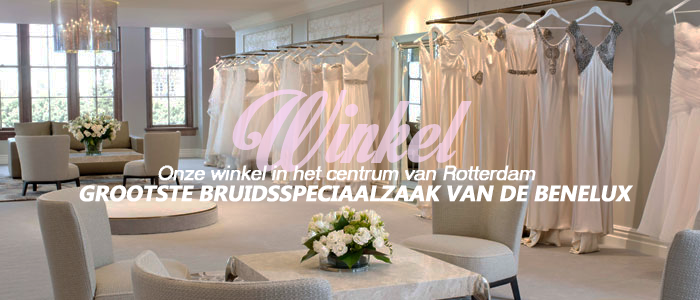
<style>
.page{position:relative;width:700px;height:300px}
.page>*{position:absolute;margin:0}
.t1{font:20px "MS Sans Serif";color:#ffffff;font-weight:bold;font-style:italic}
.t2{font:22px "MicrosoftTaiLe-Bold";letter-spacing:-0.025em;color:#ffffff;text-transform:uppercase;font-weight:bold;font-style:italic}
</style>
<div class="page">
<p class="t1" style="left:158px;top:165px;width:378px;height:16px">Onze winkel in het centrum van Rotterdam</p>
<p class="t2" style="left:79px;top:185px;width:554px;height:17px">Grootste Bruidsspeciaalzaak van de benelux</p>
</div>
